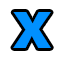
<style>
.page{position:relative;width:64px;height:64px;background:#ffffff}
.page>*{position:absolute;margin:0}
.t1{font:73.9px "MyriadPro-Bold";color:#000000}
</style>
<div class="page">
<p class="t1" style="left:13px;top:12px;width:38px;height:36px">x</p>
</div>
